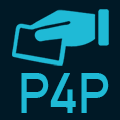
<style>
.page{position:relative;width:120px;height:120px;background:#001926}
.page>*{position:absolute;margin:0}
.t1{font:55.6px "DINAlternate-Bold";color:#1fbad6}
</style>
<div class="page">
<p class="t1" style="left:21px;top:73px;width:88px;height:40px">P4P</p>
</div>
